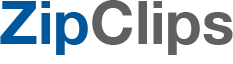
<style>
.page{position:relative;width:233px;height:64px;background:#ffffff}
.page>*{position:absolute;margin:0}
.t1{font:60px "HelveticaNeue-Bold";color:#606060}
.t2{font:60px "HelveticaNeue-Bold";color:#00579b}
</style>
<div class="page">
<p class="t1" style="left:0px;top:0px;width:233px;height:55px"><span class="t2">Zip</span>Clips</p>
</div>
